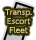
<style>
.page{position:relative;width:36px;height:40px;background:#ffffff}
.page>*{position:absolute;margin:0}
.t1{font:7px/9px "UDShinGoPro-Light";color:#cec484;font-weight:bold}
</style>
<div class="page">
<p class="t1" style="left:5px;top:9px;width:27px;height:25px;text-align:center">Transp.<br>Escort<br>Fleet</p>
</div>
